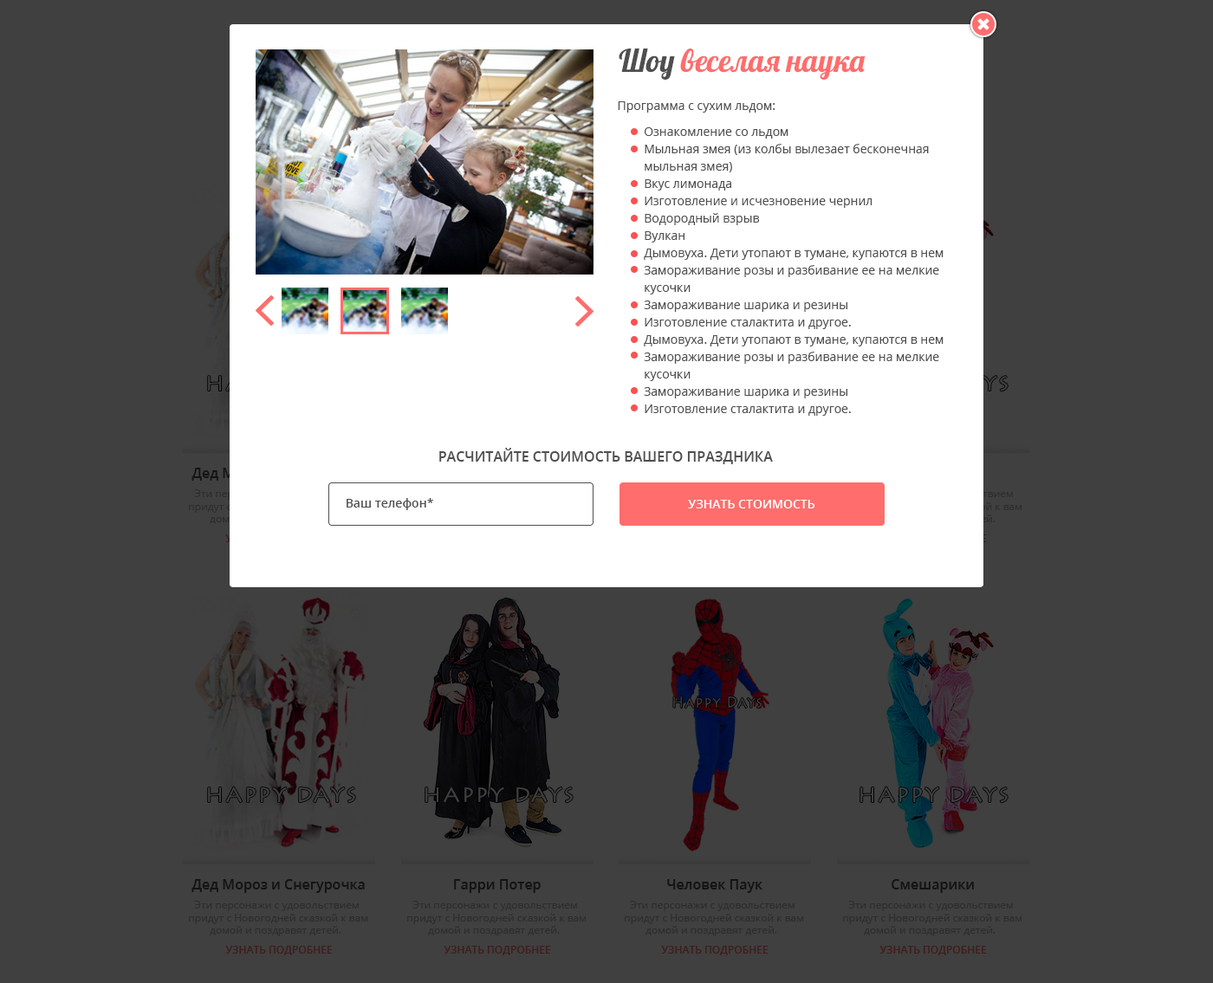
<style>
.page{position:relative;width:1213px;height:983px;background:#404040}
.page>*{position:absolute;margin:0}
.t1{font:31.2px "Lobster";color:#ff6d6d}
.t2{font:31.2px "Lobster";color:#4f4f4f}
.t3{font:12.1px "OpenSans";color:#4f4f4f}
.t4{font:12.1px/17.3px "OpenSans";color:#4f4f4f}
.t5{font:13.9px "OpenSans-Semibold";color:#4f4f4f;text-transform:uppercase}
.t6{font:12.1px "OpenSans-Semibold";color:#4f4f4f}
.t7{font:12.1px "OpenSans-Semibold";color:#ffffff;text-transform:uppercase}
</style>
<div class="page">
<p class="t1" style="left:619px;top:49px;width:246px;height:31px"><span class="t2">Шоу </span>веселая наука</p>
<p class="t3" style="left:618px;top:101px;width:156px;height:12px">Программа с сухим льдом:</p>
<p class="t4" style="left:644px;top:127px;width:299px;height:289px">Ознакомление со льдом<br>Мыльная змея (из колбы вылезает бесконечная <br>мыльная змея)<br>Вкус лимонада<br>Изготовление и исчезновение чернил<br>Водородный взрыв<br>Вулкан<br>Дымовуха. Дети утопают в тумане, купаются в нем<br>Замораживание розы и разбивание ее на мелкие <br>кусочки<br>Замораживание шарика и резины<br>Изготовление сталактита и другое.<br>Дымовуха. Дети утопают в тумане, купаются в нем<br>Замораживание розы и разбивание ее на мелкие <br>кусочки<br>Замораживание шарика и резины<br>Изготовление сталактита и другое.</p>
<p class="t5" style="left:439px;top:448px;width:334px;height:16px">расчитайте стоимость вашего праздника</p>
<p class="t6" style="left:347px;top:498px;width:86px;height:12px">Ваш телефон*</p>
<p class="t7" style="left:688px;top:500px;width:127px;height:9px">узнать стоимость</p>
</div>
